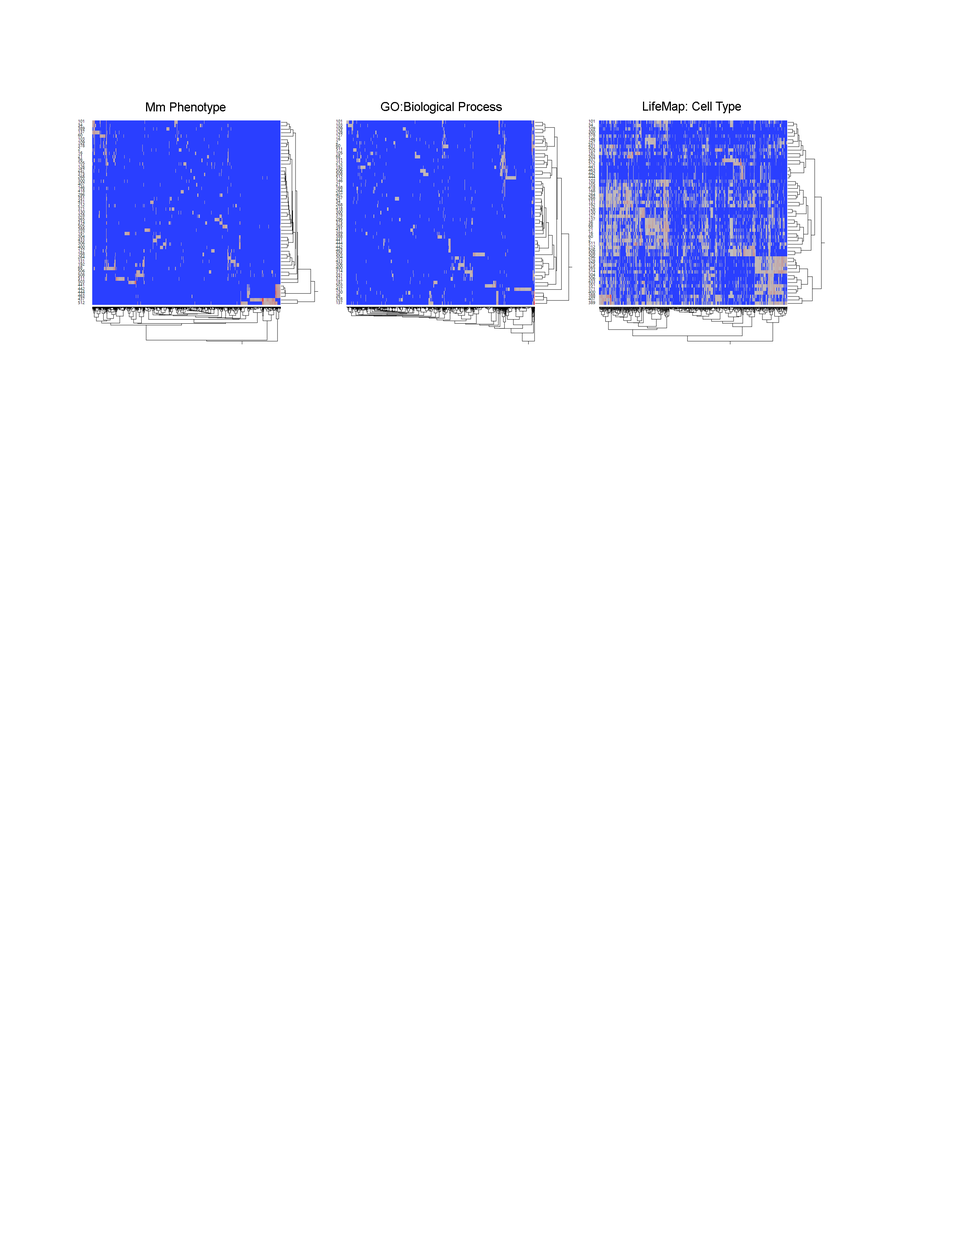
<style>
.page{position:relative;width:960px;height:1242px;background:#ffffff}
.page>*{position:absolute;margin:0}
.t1{font:12.5px "ArialMT";color:#000000}
</style>
<div class="page">
<p class="t1" style="left:643px;top:102px;width:98px;height:11px">LifeMap: Cell Type</p>
<p class="t1" style="left:146px;top:102px;width:79px;height:12px">Mm Phenotype</p>
<p class="t1" style="left:381px;top:102px;width:121px;height:12px">GO:Biological Process</p>
</div>
